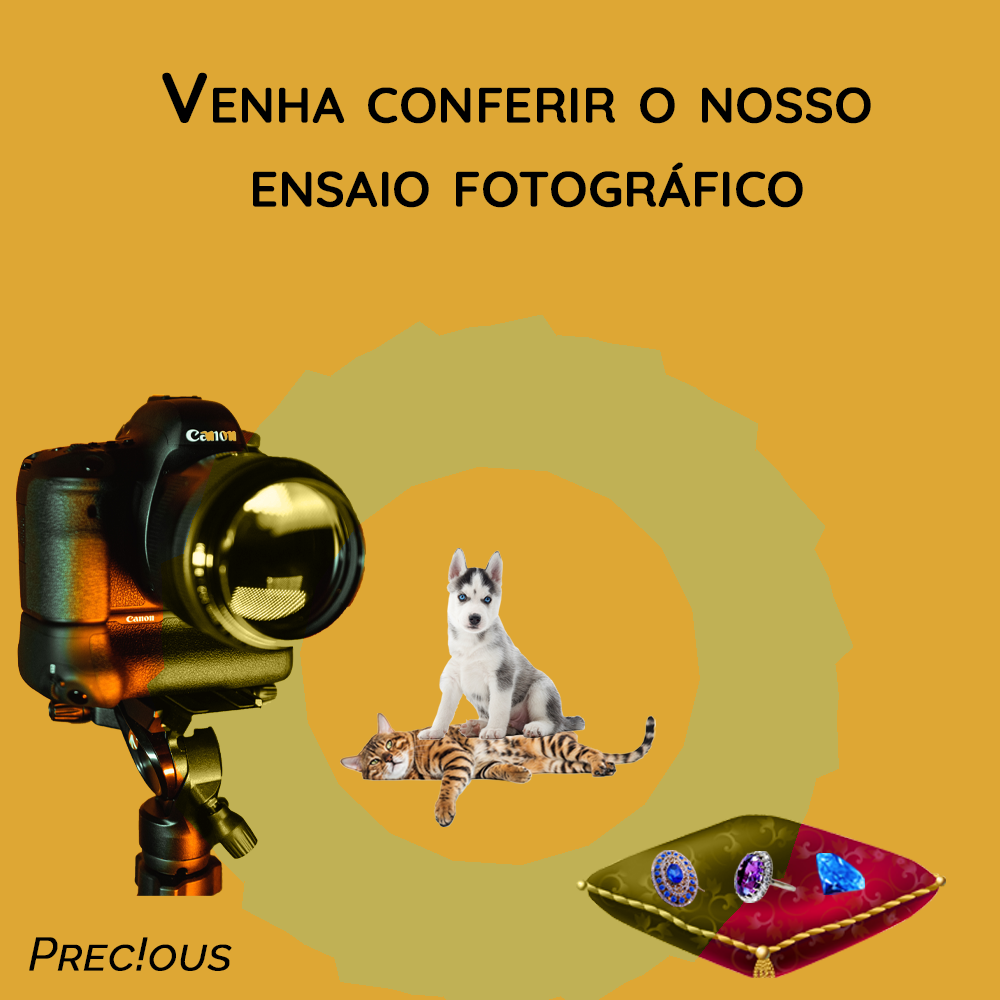
<style>
.page{position:relative;width:1000px;height:1000px;background:#dea734}
.page>*{position:absolute;margin:0}
.t1{font:70px "Quicksand-SemiBold";color:#000000;font-variant:small-caps;font-weight:bold}
.t2{font:46.2px "Raleway-Italic";color:#000000;font-variant:small-caps;font-weight:bold}
</style>
<div class="page">
<p class="t1" style="left:162px;top:72px;width:709px;height:136px;text-align:center">Venha conferir o nosso <br>ensaio fotográfico</p>
<p class="t2" style="left:29px;top:937px;width:203px;height:34px">Prec!ous</p>
</div>
